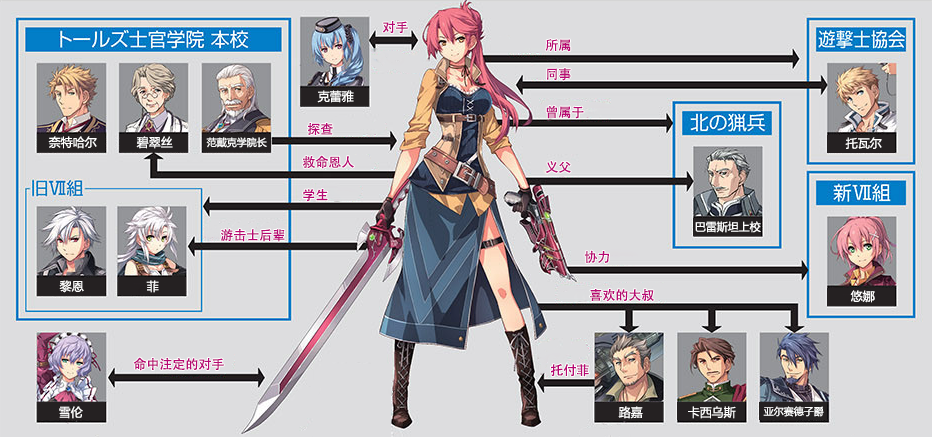
<style>
.page{position:relative;width:932px;height:437px;background:#dddddf}
.page>*{position:absolute;margin:0}
.t1{font:13px "AdobeHeitiStd-Regular";color:#b70773}
.t2{font:12px "MicrosoftYaHei";color:#ffffff}
.t3{font:10px "MicrosoftYaHei";color:#ffffff}
.t4{font:11px "MicrosoftYaHei";color:#ffffff}
</style>
<div class="page">
<p class="t1" style="left:382px;top:21px;width:26px;height:12px">对手</p>
<p class="t1" style="left:545px;top:39px;width:26px;height:13px">所属</p>
<p class="t1" style="left:547px;top:68px;width:24px;height:13px">同事</p>
<p class="t2" style="left:317px;top:90px;width:37px;height:13px">克蕾雅</p>
<p class="t1" style="left:546px;top:105px;width:38px;height:14px">曾属于</p>
<p class="t1" style="left:307px;top:123px;width:26px;height:12px">探查</p>
<p class="t2" style="left:48px;top:136px;width:49px;height:13px">奈特哈尔</p>
<p class="t2" style="left:136px;top:136px;width:37px;height:13px">碧翠丝</p>
<p class="t3" style="left:206px;top:137px;width:61px;height:11px">范戴克学院长</p>
<p class="t2" style="left:845px;top:137px;width:37px;height:12px">托瓦尔</p>
<p class="t1" style="left:302px;top:155px;width:52px;height:14px">救命恩人</p>
<p class="t1" style="left:545px;top:161px;width:26px;height:12px">义父</p>
<p class="t1" style="left:303px;top:189px;width:25px;height:13px">学生</p>
<p class="t4" style="left:695px;top:221px;width:66px;height:12px">巴雷斯坦上校</p>
<p class="t1" style="left:221px;top:229px;width:64px;height:13px">游击士后辈</p>
<p class="t1" style="left:584px;top:250px;width:25px;height:13px">协力</p>
<p class="t2" style="left:59px;top:280px;width:25px;height:13px">黎恩</p>
<p class="t2" style="left:146px;top:280px;width:13px;height:13px">菲</p>
<p class="t1" style="left:590px;top:289px;width:64px;height:13px">喜欢的大叔</p>
<p class="t2" style="left:850px;top:290px;width:25px;height:13px">悠娜</p>
<p class="t1" style="left:133px;top:357px;width:91px;height:14px">命中注定的对手</p>
<p class="t1" style="left:551px;top:364px;width:38px;height:13px">托付菲</p>
<p class="t2" style="left:59px;top:406px;width:24px;height:13px">雪伦</p>
<p class="t2" style="left:618px;top:406px;width:25px;height:13px">路嘉</p>
<p class="t2" style="left:688px;top:406px;width:48px;height:13px">卡西乌斯</p>
<p class="t3" style="left:763px;top:406px;width:61px;height:11px">亚尔赛德子爵</p>
</div>
